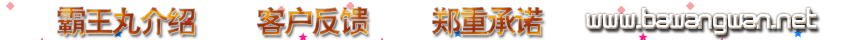
<style>
.page{position:relative;width:850px;height:40px;background:#ffffff}
.page>*{position:absolute;margin:0}
.t1{font:29px "-G-h-e-i-0-1-h";letter-spacing:-0.05em}
</style>
<div class="page">
<p class="t1" style="left:257px;top:6px;width:111px;height:30px">客户反馈</p>
<p class="t1" style="left:57px;top:7px;width:138px;height:29px">霸王丸介绍</p>
<p class="t1" style="left:432px;top:7px;width:111px;height:28px">郑重承诺</p>
</div>
